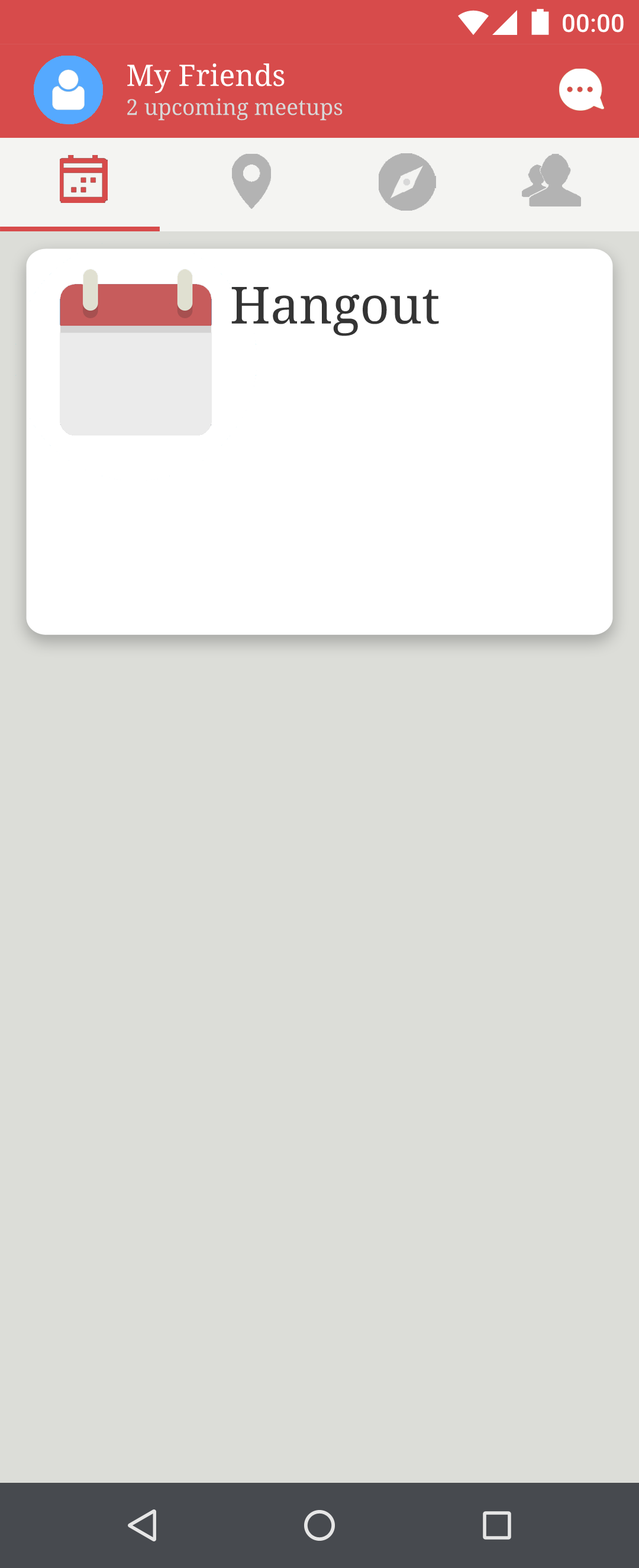
<style>
.page{position:relative;width:639px;height:1568px;background:#dcddd8}
.page>*{position:absolute;margin:0}
.t1{font:24.9px "Roboto-Medium";color:#ffffff}
.t2{font:29.6px "NotoSerif";color:#ffffff}
.t3{font:21.9px "NotoSerif";color:#d8d8d8}
.t4{font:51.2px "NotoSerif";color:#343434}
</style>
<div class="page">
<p class="t1" style="left:563px;top:14px;width:61px;height:19px">00:00</p>
<p class="t2" style="left:127px;top:63px;width:158px;height:30px">My Friends</p>
<p class="t3" style="left:127px;top:98px;width:216px;height:23px">2 upcoming meetups</p>
<p class="t4" style="left:231px;top:287px;width:208px;height:49px">Hangout</p>
</div>
